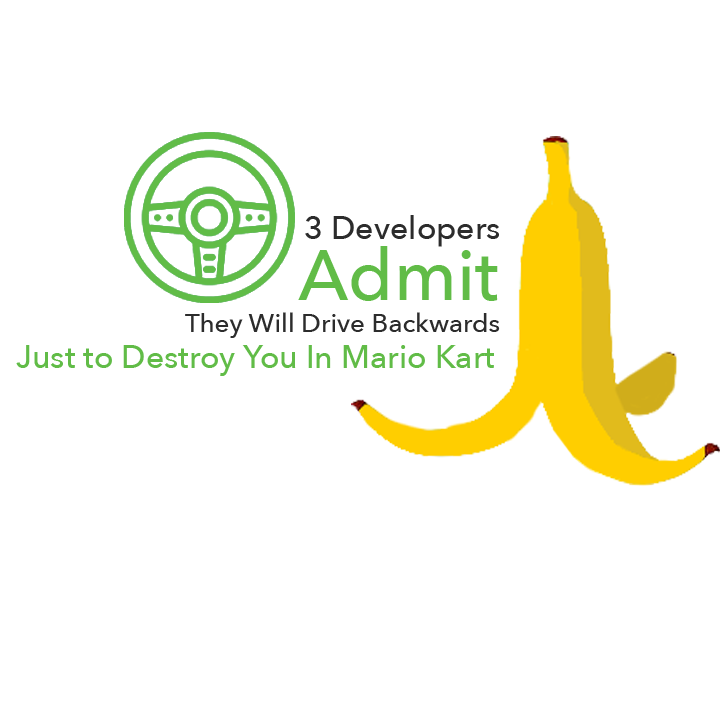
<style>
.page{position:relative;width:720px;height:720px;background:#ffffff}
.page>*{position:absolute;margin:0}
.t1{font:32px "AvenirNext-Medium";color:#2c2c2c}
.t2{font:71px "AvenirNext-Medium";color:#61bc47}
.t3{font:26px "AvenirNext-Medium";color:#2c2c2c}
.t4{font:32px "AvenirNext-Medium";color:#61bc47}
</style>
<div class="page">
<p class="t1" style="left:305px;top:215px;width:194px;height:32px">3 Developers</p>
<p class="t2" style="left:298px;top:246px;width:200px;height:55px">Admit</p>
<p class="t3" style="left:185px;top:312px;width:315px;height:26px">They Will Drive Backwards</p>
<p class="t4" style="left:16px;top:345px;width:478px;height:31px">Just to Destroy You In Mario Kart</p>
</div>
